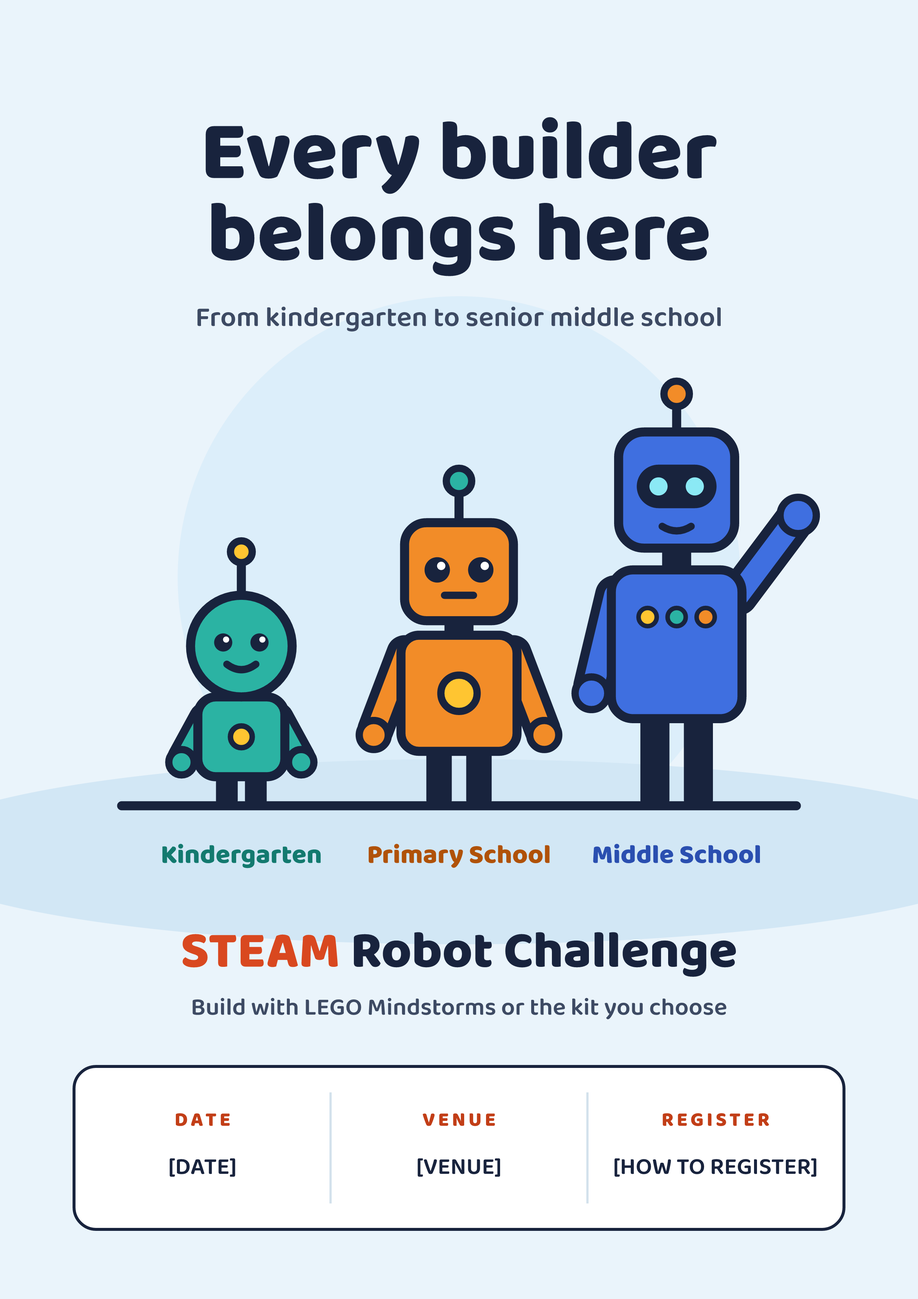
<style>
.page{position:relative;width:918px;height:1299px;background:#eaf4fb}
.page>*{position:absolute;margin:0}
.t1{font:85.2px/81.4px "Baloo2-ExtraBold";color:#18233d}
.t2{font:28.1px "Baloo2-SemiBold";color:#3d4a63}
.t3{font:26.7px "Baloo2-ExtraBold";color:#137a6f}
.t4{font:26.7px "Baloo2-ExtraBold";color:#b05208}
.t5{font:26.7px "Baloo2-ExtraBold";color:#2a4fb0}
.t6{font:51.8px "Baloo2-ExtraBold";color:#18233d}
.t7{font:51.8px "Baloo2-ExtraBold";color:#d9481f}
.t8{font:24.4px "Baloo2-SemiBold";color:#3d4a63}
.t9{font:20px "Baloo2-ExtraBold";letter-spacing:0.148em;color:#c23e17}
.t10{font:23.7px "Baloo2-SemiBold";color:#18233d}
</style>
<div class="page">
<p class="t1" style="left:205px;top:117px;width:512px;height:159px;text-align:center">Every builder<br>belongs here</p>
<p class="t2" style="left:197px;top:307px;width:524px;height:25px">From kindergarten to senior middle school</p>
<p class="t3" style="left:162px;top:843px;width:159px;height:25px">Kindergarten</p>
<p class="t4" style="left:369px;top:843px;width:181px;height:25px">Primary School</p>
<p class="t5" style="left:593px;top:843px;width:167px;height:20px">Middle School</p>
<p class="t6" style="left:183px;top:932px;width:553px;height:45px"><span class="t7">STEAM</span> Robot Challenge</p>
<p class="t8" style="left:193px;top:998px;width:534px;height:21px">Build with LEGO Mindstorms or the kit you choose</p>
<p class="t9" style="left:176px;top:1113px;width:54px;height:13px">DATE</p>
<p class="t9" style="left:423px;top:1113px;width:72px;height:13px">VENUE</p>
<p class="t9" style="left:663px;top:1113px;width:106px;height:13px">REGISTER</p>
<p class="t10" style="left:170px;top:1158px;width:65px;height:19px">[DATE]</p>
<p class="t10" style="left:418px;top:1158px;width:82px;height:19px">[VENUE]</p>
<p class="t10" style="left:615px;top:1158px;width:202px;height:19px">[HOW TO REGISTER]</p>
</div>
